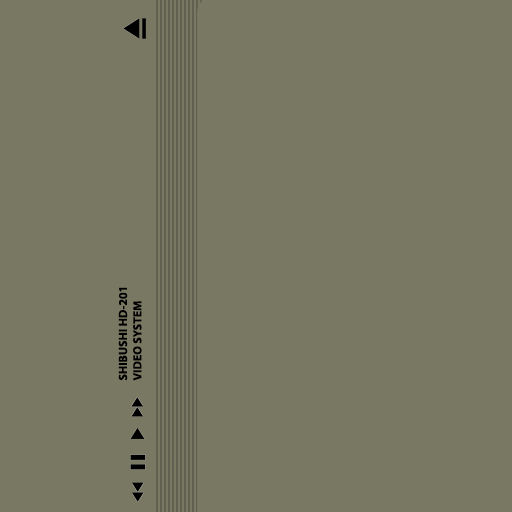
<style>
.page{position:relative;width:512px;height:512px;background:#797863}
.page>*{position:absolute;margin:0}
.t1{font:12px "MyriadPro-Bold";color:#000000}
</style>
<div class="page">
<p class="t1" style="left:118px;top:287px;width:24px;height:94px;rotate:-90deg">SHIBUSHI HD-201 <br>VIDEO SYSTEM</p>
</div>
